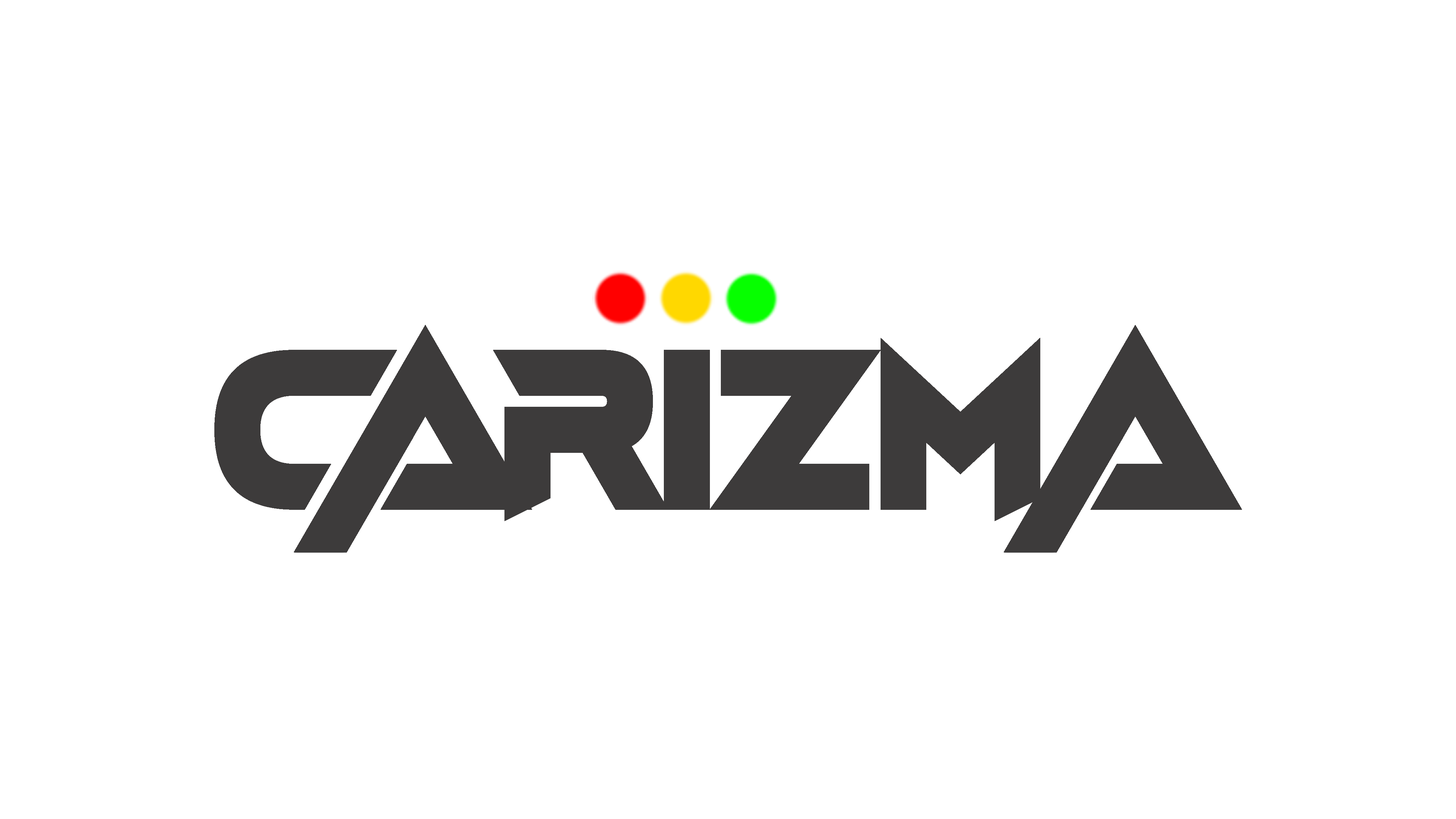
<style>
.page{position:relative;width:1456px;height:819px;background:#ffffff}
.page>*{position:absolute;margin:0}
.t1{font:233.4px "FastHand";color:#3d3b3b}
</style>
<div class="page">
<p class="t1" style="left:214px;top:325px;width:1028px;height:196px">CARIZMA</p>
</div>
